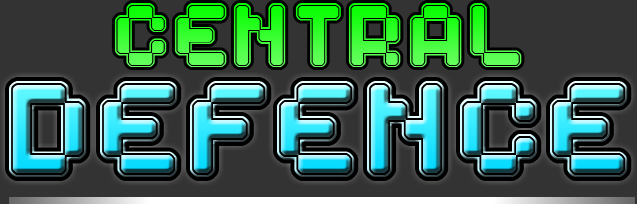
<style>
.page{position:relative;width:637px;height:204px;background:#333333}
.page>*{position:absolute;margin:0}
.t1{font:64px "Spaceboy"}
.t2{font:96.5px "Spaceboy"}
</style>
<div class="page">
<p class="t1" style="left:114px;top:3px;width:408px;height:64px">CENTRAL</p>
<p class="t2" style="left:9px;top:81px;width:619px;height:96px">DEFENCE</p>
</div>
